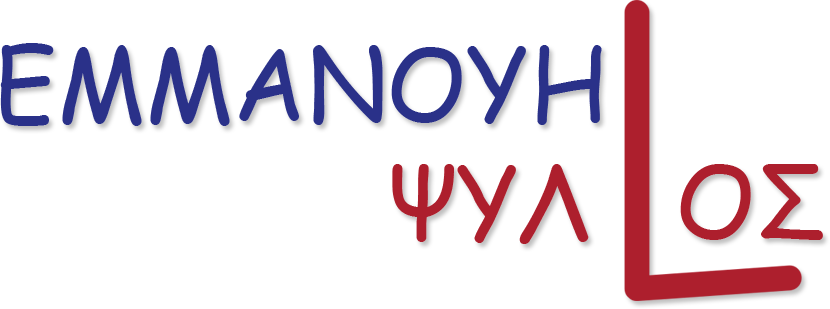
<style>
.page{position:relative;width:830px;height:309px;background:#ffffff}
.page>*{position:absolute;margin:0}
.t1{font:100px "ComicSansMS";color:#2a3189}
.t2{font:100px "ComicSansMS";color:#ad1f2d}
</style>
<div class="page">
<p class="t1" style="left:0px;top:43px;width:602px;height:83px">ΕΜΜΑΝΟΥΗ</p>
<p class="t2" style="left:392px;top:164px;width:197px;height:80px">ΨΥΛ</p>
<p class="t2" style="left:680px;top:164px;width:143px;height:76px">ΟΣ</p>
</div>
